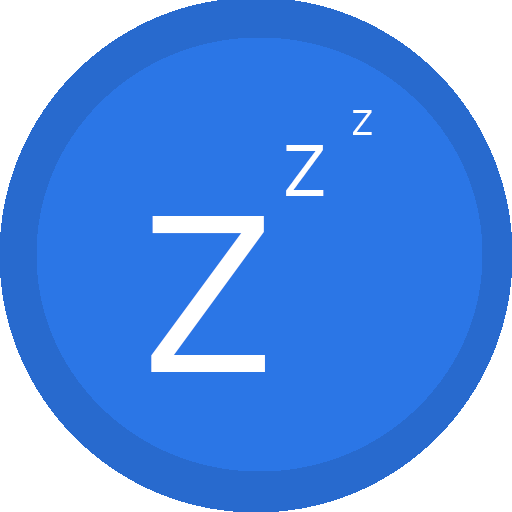
<style>
.page{position:relative;width:512px;height:512px;background:#2b76e6}
.page>*{position:absolute;margin:0}
.t1{font:36px "Avenir-Roman";color:#ffffff}
.t2{font:72px "Avenir-Roman";color:#ffffff}
.t3{font:220px "Avenir-Roman";color:#ffffff}
.t4{font:120px "Avenir-Roman";color:#eb474a}
</style>
<div class="page">
<p class="t1" style="left:353px;top:110px;width:19px;height:25px">Z</p>
<p class="t2" style="left:286px;top:145px;width:38px;height:51px">Z</p>
<p class="t3" style="left:151px;top:216px;width:114px;height:156px"><span class="t4"><br></span>Z</p>
</div>
